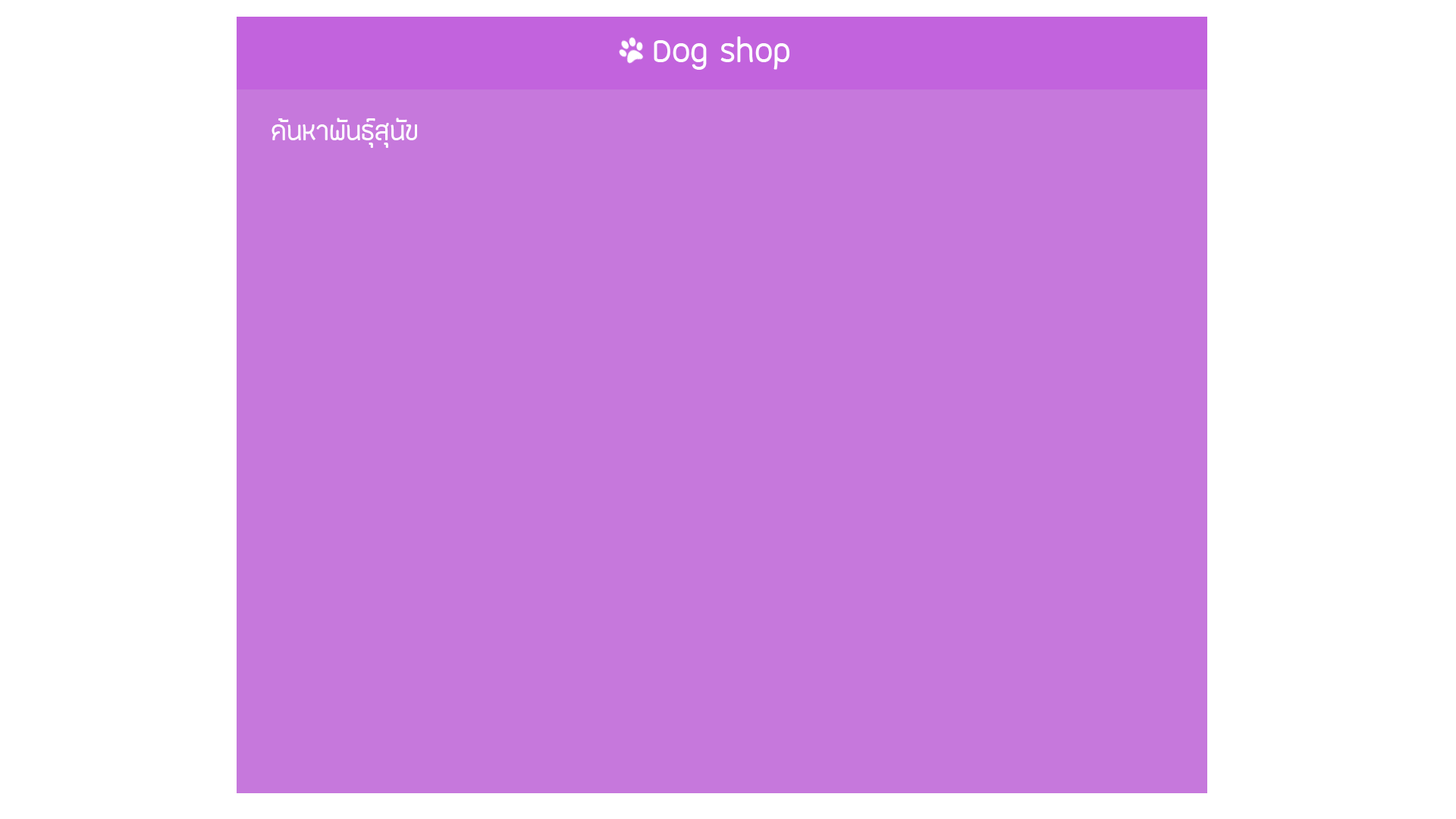
<style>
.page{position:relative;width:1456px;height:819px;background:#c678dc}
.page>*{position:absolute;margin:0}
.t1{font:45.5px "FCLamoonRegular";color:#ffffff}
.t2{font:36.4px "FCLamoonRegular";color:#ffffff}
</style>
<div class="page">
<p class="t1" style="left:654px;top:36px;width:135px;height:34px">Dog shop</p>
<p class="t2" style="left:271px;top:118px;width:146px;height:30px">ค้นหาพันธุ์สุนัข</p>
</div>
